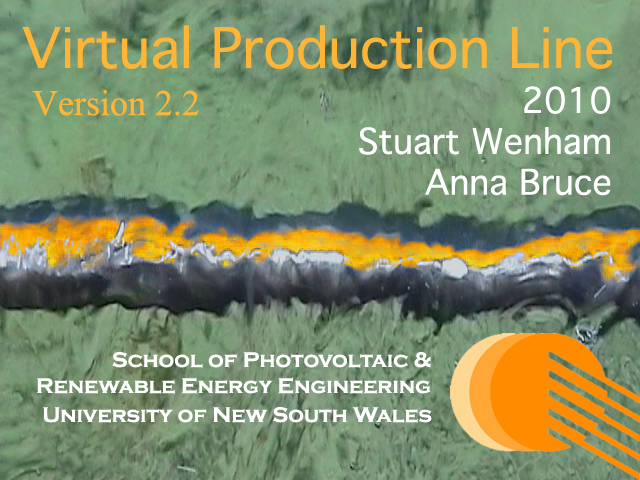
<style>
.page{position:relative;width:640px;height:480px}
.page>*{position:absolute;margin:0}
.t1{font:54px "GenevaCY";color:#feb536}
.t2{font:34px "GenevaCY";color:#ffffff}
.t3{font:36px "TimesNewRomanPSMT";color:#feb536}
.t4{font:22px "CopperplateGothic-Bold";color:#ffffff}
</style>
<div class="page">
<p class="t1" style="left:22px;top:25px;width:591px;height:44px">Virtual Production Line</p>
<p class="t2" style="left:359px;top:86px;width:252px;height:110px;text-align:right">2010<br>Stuart Wenham<br>Anna Bruce</p>
<p class="t3" style="left:32px;top:90px;width:167px;height:26px">Version 2.2</p>
<p class="t4" style="left:112px;top:352px;width:319px;height:16px">School of Photovoltaic &amp;</p>
<p class="t4" style="left:37px;top:377px;width:394px;height:17px">Renewable Energy Engineering</p>
<p class="t4" style="left:43px;top:407px;width:389px;height:16px">University of New South Wales</p>
</div>
